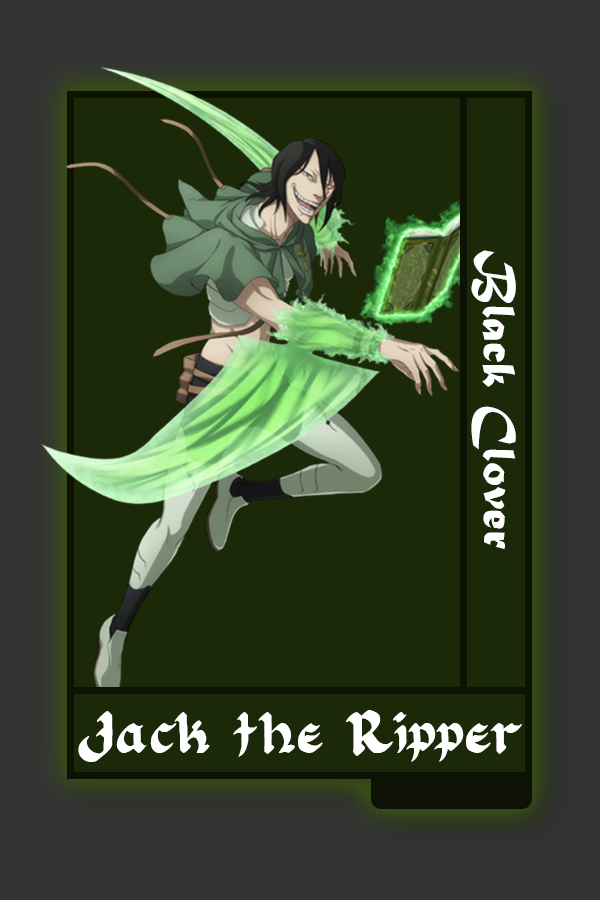
<style>
.page{position:relative;width:600px;height:900px;background:#1b2908}
.page>*{position:absolute;margin:0}
.t1{font:48.8px "MaturaMTScriptCapitals";color:#ffffff}
.t2{font:49.8px "FloranteatLaura";color:#ffffff}
</style>
<div class="page">
<p class="t1" style="left:471px;top:250px;width:45px;height:299px;rotate:90deg">Black Clover</p>
<p class="t2" style="left:78px;top:710px;width:444px;height:52px">Jack the Ripper</p>
</div>
